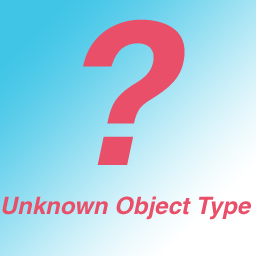
<style>
.page{position:relative;width:256px;height:256px}
.page>*{position:absolute;margin:0}
.t1{font:200px "Helvetica-BoldOblique";color:#e94f69}
.t2{font:24px "Helvetica-BoldOblique";color:#e94f69}
</style>
<div class="page">
<p class="t1" style="left:83px;top:19px;width:102px;height:146px">?</p>
<p class="t2" style="left:2px;top:196px;width:249px;height:24px">Unknown Object Type</p>
</div>
